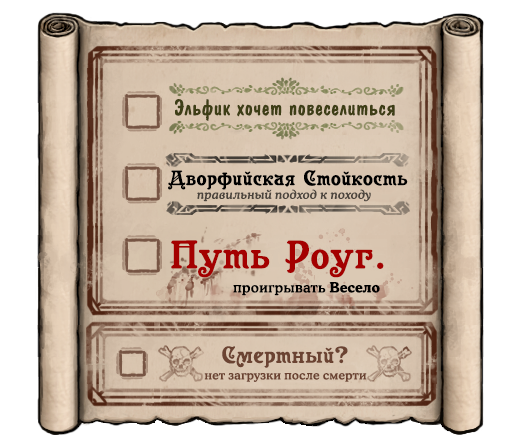
<style>
.page{position:relative;width:520px;height:448px;background:#ffffff}
.page>*{position:absolute;margin:0}
.t1{font:22px "ADomIno";letter-spacing:0.025em;color:#3e3e16}
.t2{font:20.7px "Casanova";letter-spacing:0.025em;color:#000000}
.t3{font:12px "CooperMediumCBT-Italic";letter-spacing:0.025em;color:#4b453d}
.t4{font:39.6px "Casanova";letter-spacing:0.025em;color:#a40000}
.t5{font:14px "CooperMediumCBT";letter-spacing:0.025em;color:#000000}
.t6{font:14px "CooperLightCBT-Bold";letter-spacing:0.025em;color:#000000}
.t7{font:23px "Casanova";letter-spacing:0.025em;color:#6b4332}
.t8{font:12px "CooperMediumCBT";letter-spacing:0.025em;color:#6b4332}
</style>
<div class="page">
<p class="t1" style="left:175px;top:99px;width:220px;height:22px">Эльфик хочет повеселиться</p>
<p class="t2" style="left:168px;top:170px;width:240px;height:20px">Дворфийская Стойкость</p>
<p class="t3" style="left:197px;top:189px;width:174px;height:13px">правильный подход к походу</p>
<p class="t4" style="left:171px;top:240px;width:213px;height:38px">Путь Роуг.</p>
<p class="t5" style="left:233px;top:282px;width:147px;height:14px">проигрывать <span class="t6">Весело</span></p>
<p class="t7" style="left:222px;top:346px;width:126px;height:22px">Смертный?</p>
<p class="t8" style="left:204px;top:373px;width:163px;height:9px">нет загрузки после смерти</p>
</div>
